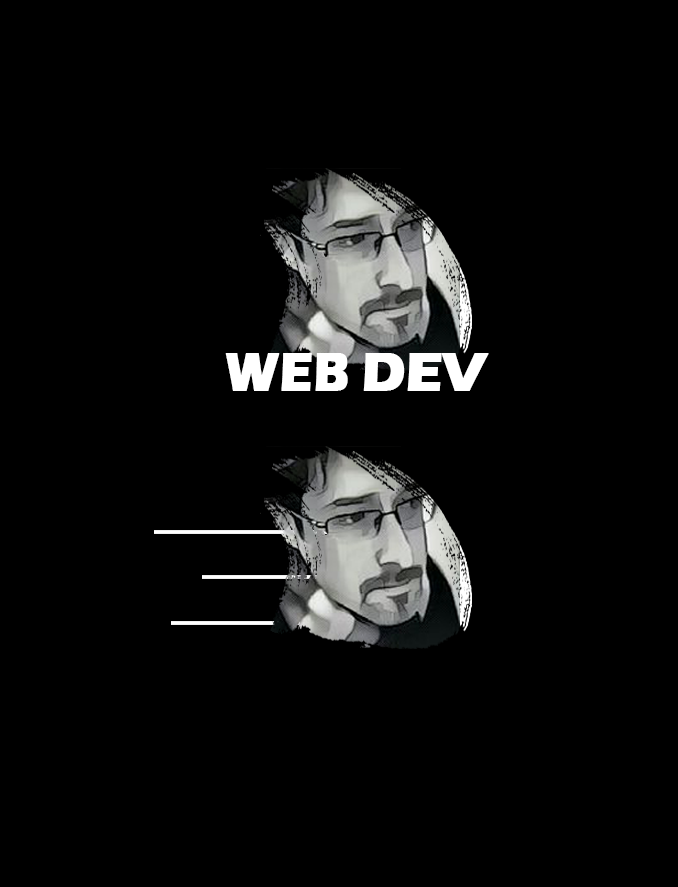
<style>
.page{position:relative;width:678px;height:887px;background:#000000}
.page>*{position:absolute;margin:0}
.t1{font:56px "ErasITC-Bold";letter-spacing:-0.02em;color:#ffffff;text-transform:uppercase;font-weight:bold;scale:0.9 1}
.t2{font:56px "ErasITC-Bold";letter-spacing:-0.02em;color:#ffffff;text-transform:uppercase;font-weight:bold}
</style>
<div class="page">
<p class="t1" style="left:225px;top:353px;width:123px;height:38px">Web</p>
<p class="t2" style="left:363px;top:353px;width:126px;height:38px">Dev</p>
</div>
